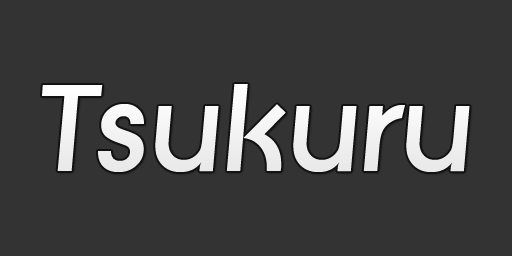
<style>
.page{position:relative;width:512px;height:256px;background:#333333}
.page>*{position:absolute;margin:0}
.t1{font:120px "LiteraSerialHeavyItalic";color:#ffffff}
</style>
<div class="page">
<p class="t1" style="left:42px;top:84px;width:428px;height:88px">Tsukuru</p>
</div>
